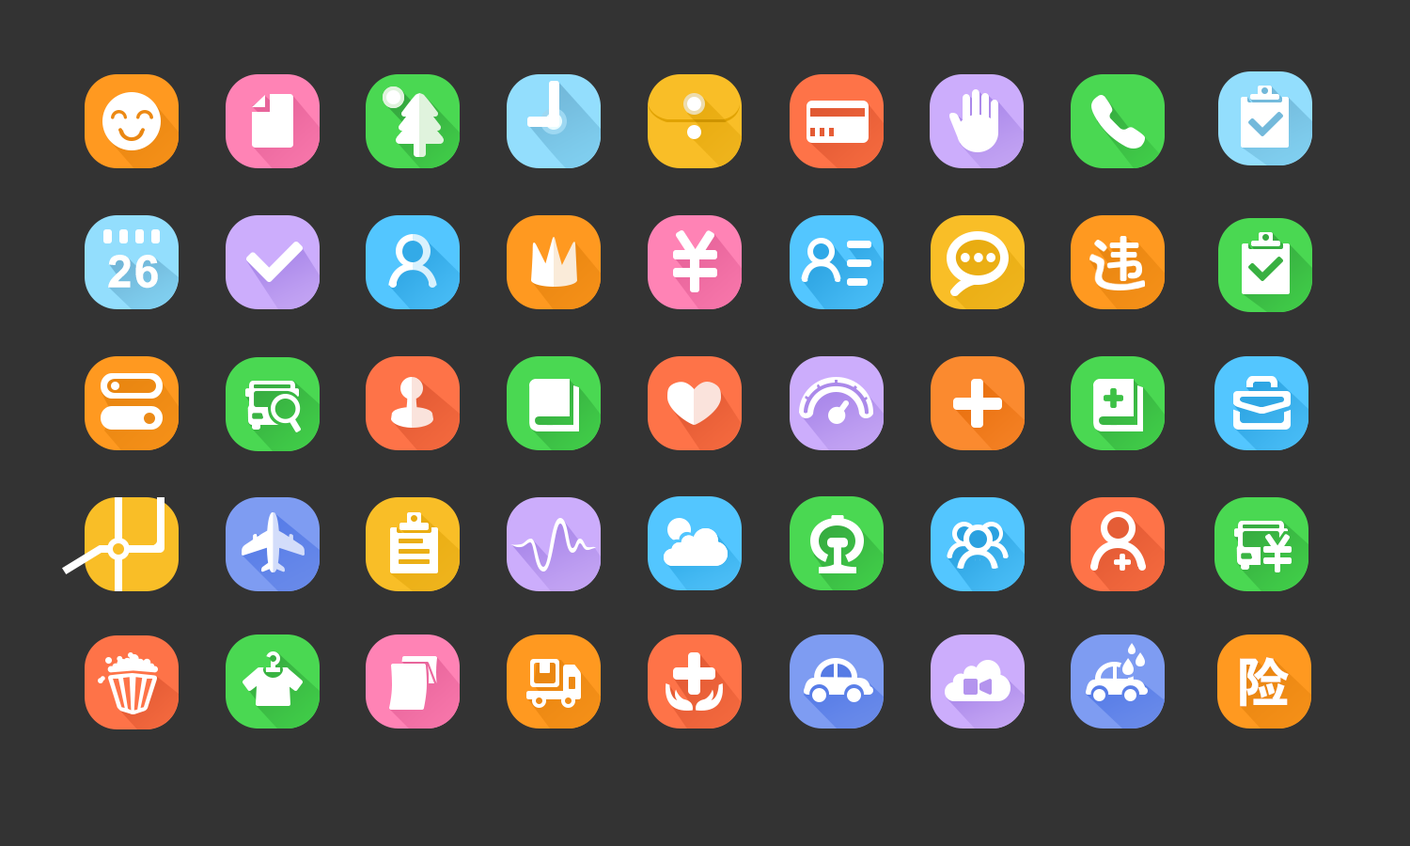
<style>
.page{position:relative;width:1410px;height:846px;background:#333333}
.page>*{position:absolute;margin:0}
.t1{font:44.9px "Arial-BoldMT";color:#fffffe}
.t2{font:52.6px "HeitiCSEG";color:#ffffff}
</style>
<div class="page">
<p class="t1" style="left:108px;top:255px;width:50px;height:34px">26</p>
<p class="t2" style="left:1240px;top:657px;width:49px;height:50px">险</p>
</div>
